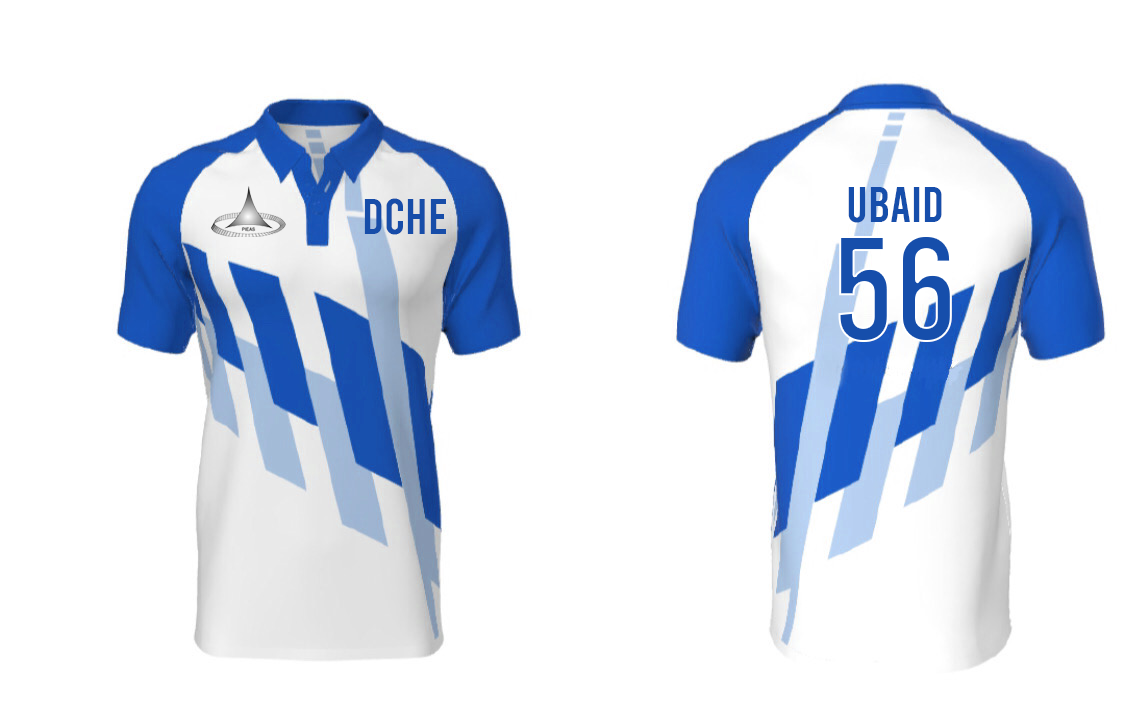
<style>
.page{position:relative;width:1125px;height:706px;background:#ffffff}
.page>*{position:absolute;margin:0}
.t1{font:50px "Bebas-Regular";color:#174da9}
.t2{font:50px "Bebas-Regular";color:#164eab}
.t3{font:149.9px "Bebas-Regular";color:#164eab}
</style>
<div class="page">
<p class="t1" style="left:364px;top:198px;width:82px;height:37px">DCHE</p>
<p class="t2" style="left:848px;top:187px;width:94px;height:36px">UBAID</p>
<p class="t3" style="left:838px;top:235px;width:114px;height:107px">56</p>
</div>
